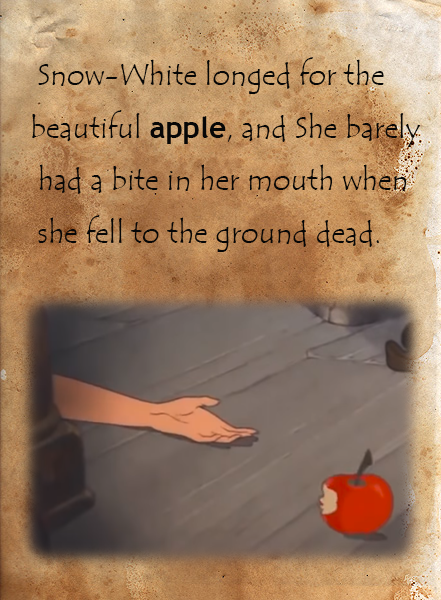
<style>
.page{position:relative;width:441px;height:600px}
.page>*{position:absolute;margin:0}
.t1{font:30px "TempusSansITC";color:#070707}
.t2{font:30px "TrebuchetMS-Bold";color:#070707}
</style>
<div class="page">
<p class="t1" style="left:32px;top:57px;width:389px;height:195px">Snow-White longed for the <br>beautiful <span class="t2">apple</span>, and She barely<br> had a bite in her mouth when<br> she fell to the ground dead.</p>
</div>
